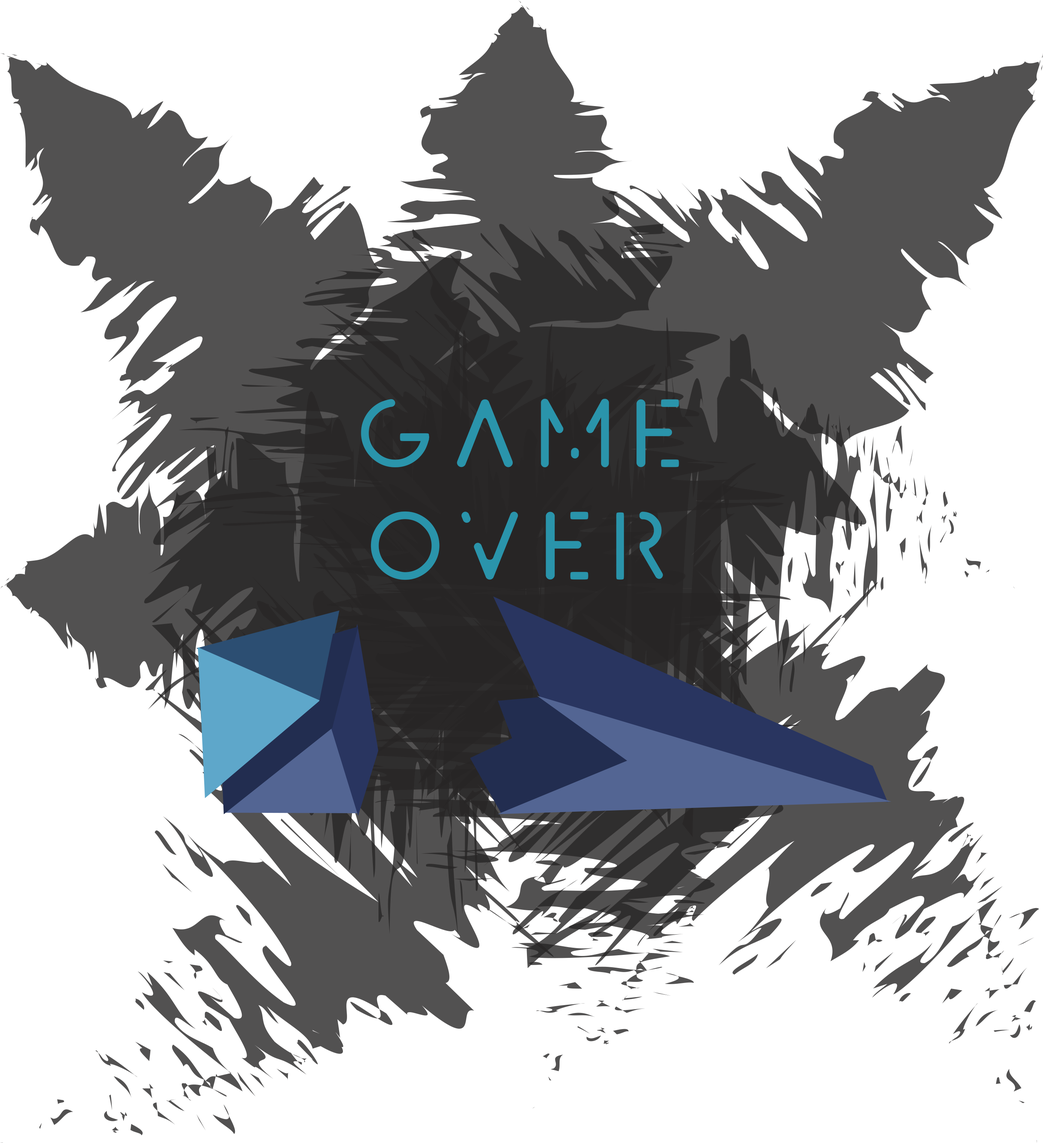
<style>
.page{position:relative;width:1043px;height:1143px;background:#ffffff}
.page>*{position:absolute;margin:0}
.t1{font:93.7px "Avayx";color:#2a94ab}
</style>
<div class="page">
<p class="t1" style="left:361px;top:399px;width:318px;height:181px;text-align:center">game<br>over</p>
</div>
